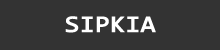
<style>
.page{position:relative;width:220px;height:50px;background:#333333}
.page>*{position:absolute;margin:0}
.t1{font:23.6px "Consolas";color:#ffffff;font-weight:bold;scale:1.13 1}
</style>
<div class="page">
<p class="t1" style="left:65px;top:16px;width:91px;height:17px">SIPKIA</p>
</div>
